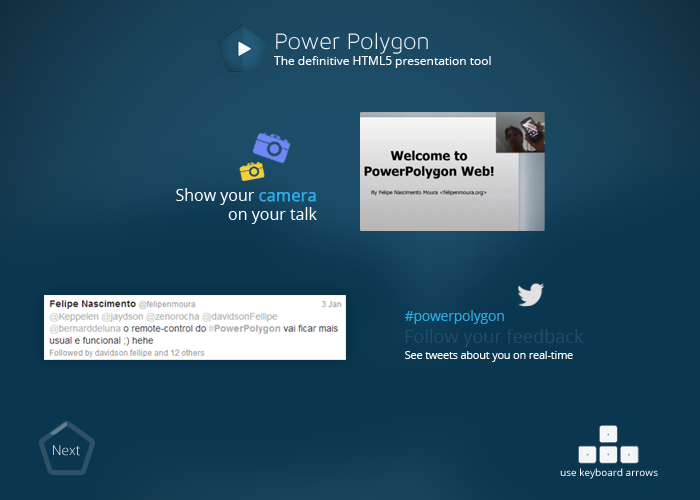
<style>
.page{position:relative;width:700px;height:500px;background:#0a364f}
.page>*{position:absolute;margin:0}
.t1{font:24px "MavenProLight300-Regular";color:#ffffff}
.t2{font:12px "OpenSans";color:#ffffff}
.t3{font:16px "OpenSans";color:#ffffff}
.t4{font:16px "OpenSans";color:#2daae2;font-weight:bold}
.t5{font:13.6px "OpenSans";color:#2daae2}
.t6{font:18.1px "OpenSans";color:#1e4d68}
.t7{font:10.6px "OpenSans";color:#ffffff}
.t8{font:13.6px "OpenSans-Light"}
.t9{font:10px "OpenSans";color:#ffffff}
</style>
<div class="page">
<p class="t1" style="left:276px;top:32px;width:152px;height:22px">Power Polygon</p>
<p class="t2" style="left:274px;top:56px;width:217px;height:12px">The definitive HTML5 presentation tool</p>
<p class="t3" style="left:176px;top:188px;width:141px;height:36px;text-align:right">Show your <span class="t4">camera<br></span>on your talk</p>
<p class="t5" style="left:405px;top:310px;width:99px;height:14px">#powerpolygon</p>
<p class="t6" style="left:405px;top:329px;width:179px;height:18px">Follow your feedback</p>
<p class="t7" style="left:405px;top:351px;width:168px;height:11px">See tweets about you on real-time</p>
<p class="t8" style="left:53px;top:445px;width:27px;height:11px">Next</p>
<p class="t9" style="left:560px;top:468px;width:98px;height:11px">use keyboard arrows</p>
</div>
